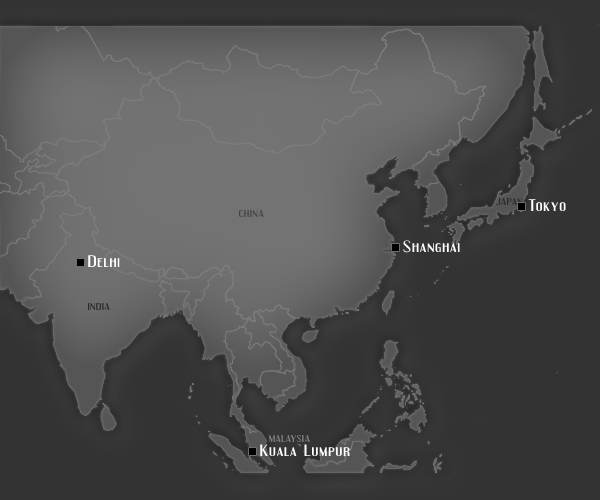
<style>
.page{position:relative;width:600px;height:500px;background:#333333}
.page>*{position:absolute;margin:0}
.t1{font:8.8px "Engebrechtre";letter-spacing:0.05em;color:#424242;scale:1.25 1}
.t2{font:14.4px "Engebrechtre";letter-spacing:0.05em;color:#ffffff;scale:1.25 1}
.t3{font:8.8px "Engebrechtre";letter-spacing:0.05em;color:#848383;scale:1.25 1}
</style>
<div class="page">
<p class="t1" style="left:495px;top:198px;width:28px;height:7px">JAPAN</p>
<p class="t2" style="left:528px;top:199px;width:38px;height:12px">Tokyo</p>
<p class="t1" style="left:239px;top:210px;width:25px;height:7px">CHINA</p>
<p class="t2" style="left:403px;top:240px;width:57px;height:13px">Shanghai</p>
<p class="t2" style="left:88px;top:255px;width:32px;height:12px">Delhi</p>
<p class="t1" style="left:88px;top:303px;width:22px;height:7px">INDIA</p>
<p class="t3" style="left:269px;top:435px;width:41px;height:7px">MALAYSIA</p>
<p class="t2" style="left:260px;top:444px;width:90px;height:12px">Kuala Lumpur</p>
</div>
